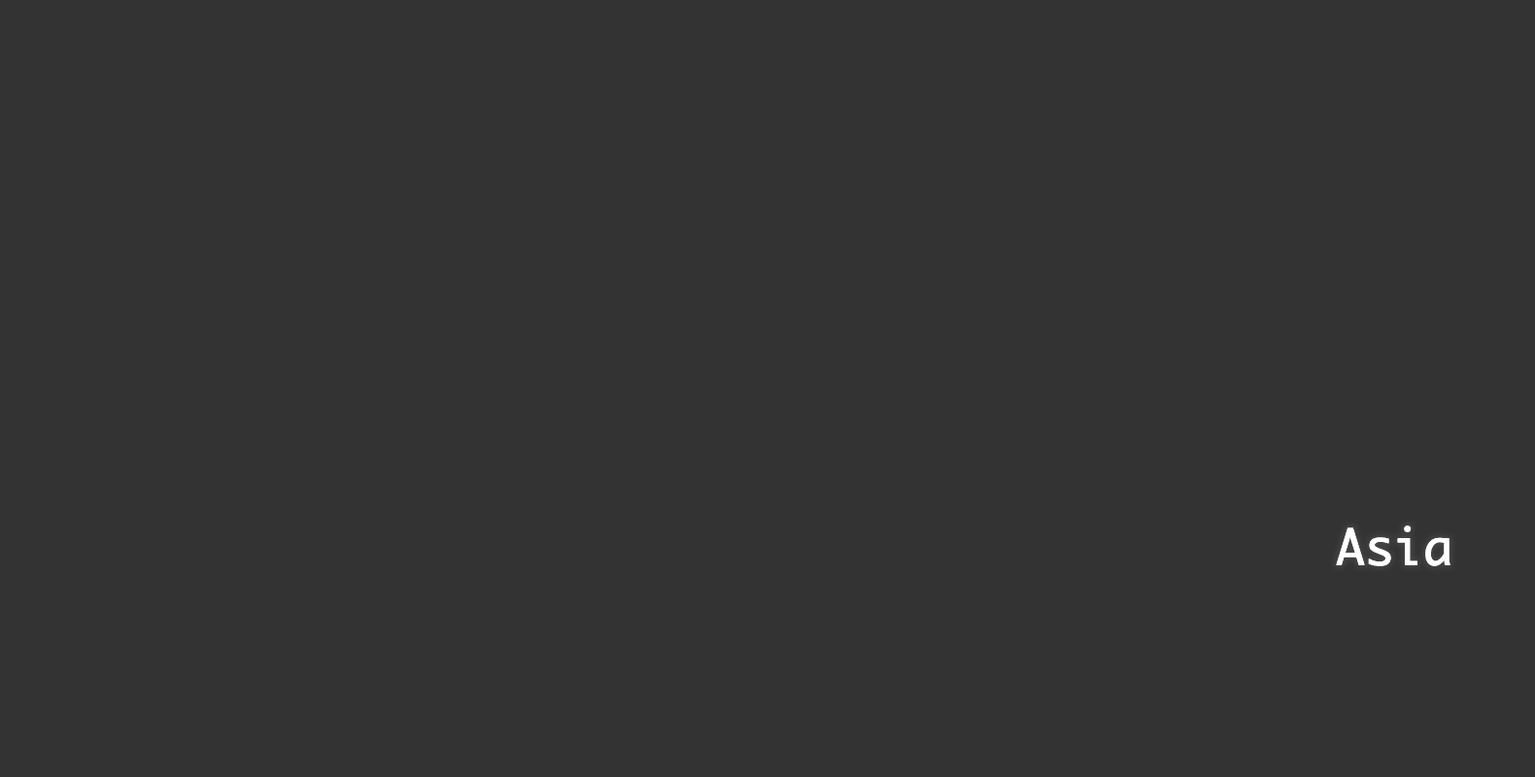
<style>
.page{position:relative;width:1535px;height:777px;background:#333333}
.page>*{position:absolute;margin:0}
.t1{font:48.6px "Ayuthaya";color:#ffffff}
</style>
<div class="page">
<p class="t1" style="left:1336px;top:525px;width:114px;height:41px">Asia</p>
</div>
